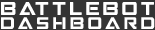
<style>
.page{position:relative;width:155px;height:30px;background:#333333}
.page>*{position:absolute;margin:0}
.t1{font:20px/14px "StrikeFighter";color:#ffffff}
.t2{font:18px/14px "StrikeFighter";color:#ffffff}
</style>
<div class="page">
<p class="t1" style="left:1px;top:2px;width:154px;height:27px;text-align:justify">Battlebot<br><span class="t2">Dashboard</span></p>
</div>
